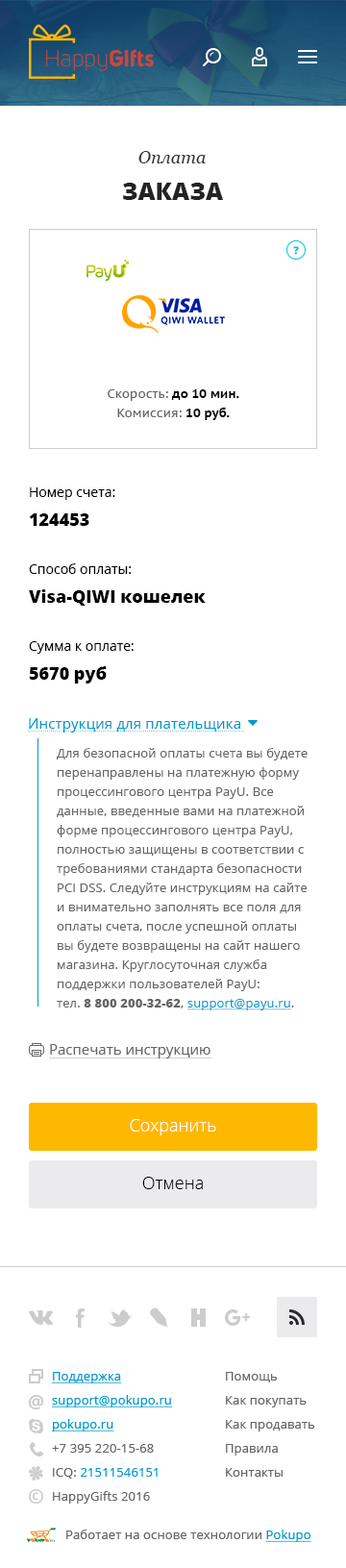
<style>
.page{position:relative;width:346px;height:1568px;background:#ffffff}
.page>*{position:absolute;margin:0}
.t1{font:17.3px "Georgia-Italic";color:#333333}
.t2{font:24px "OpenSans-Extrabold";color:#232323;text-transform:uppercase}
.t3{font:12.5px/19.2px "PTSans-CaptionBold";letter-spacing:0.01em;color:#000000}
.t4{font:12.5px/19.2px "PTSans-Caption";letter-spacing:0.01em;color:#666666}
.t5{font:13.5px/28.8px "OpenSans";color:#000000}
.t6{font:17.3px/28.8px "OpenSans-Extrabold";color:#000000}
.t7{font:12.5px/19.2px "OpenSans";letter-spacing:0.01em;color:#666666}
.t8{font:14.4px/19.2px "OpenSans";letter-spacing:0.01em;color:#0099cc}
.t9{font:12.5px/19.2px "OpenSans-Extrabold";letter-spacing:0.01em;color:#666666}
.t10{font:12.5px/19.2px "OpenSans";letter-spacing:0.01em;color:#0099cc;text-decoration:underline}
.t11{font:14.4px "OpenSans";color:#666666}
.t12{font:17.3px "OpenSans-Light";color:#ffffff}
.t13{font:17.3px "OpenSans-Light";color:#000000}
</style>
<div class="page">
<p class="t1" style="left:138px;top:151px;width:68px;height:12px">Оплата</p>
<p class="t2" style="left:123px;top:183px;width:100px;height:17px">заказа</p>
<p class="t3" style="left:108px;top:389px;width:131px;height:31px;text-align:center"><span class="t4">Скорость:</span> до 10 мин.<br><span class="t4">Комиссия:</span> 10 руб.</p>
<p class="t5" style="left:29px;top:487px;width:86px;height:39px">Номер счета:<br><span class="t6">124453</span></p>
<p class="t6" style="left:29px;top:563px;width:177px;height:43px"><span class="t5">Способ оплаты:<br></span>Visa-QIWI кошелек</p>
<p class="t5" style="left:29px;top:641px;width:105px;height:43px">Сумма к оплате:<br><span class="t6">5670 руб</span></p>
<p class="t7" style="left:29px;top:718px;width:279px;height:292px"><span class="t8">Инструкция для плательщика<br></span>Для безопасной оплаты счета вы будете перенаправлены на платежную форму процессингового центра PayU. Все данные, введенные вами на платежной форме процессингового центра PayU, полностью защищены в соответствии с требованиями стандарта безопасности PCI DSS. Следуйте инструкциям на сайте и внимательно заполнять все поля для оплаты счета, после успешной оплаты вы будете возвращены на сайт нашего магазина. Круглосуточная служба поддержки пользователей PayU:<br>тел. <span class="t9">8 800 200-32-62</span>, <span class="t10">support@payu.ru</span>.</p>
<p class="t11" style="left:50px;top:1044px;width:161px;height:14px">Распечать инструкцию</p>
<p class="t12" style="left:130px;top:1119px;width:86px;height:16px">Сохранить</p>
<p class="t13" style="left:142px;top:1177px;width:61px;height:12px">Отмена</p>
</div>
